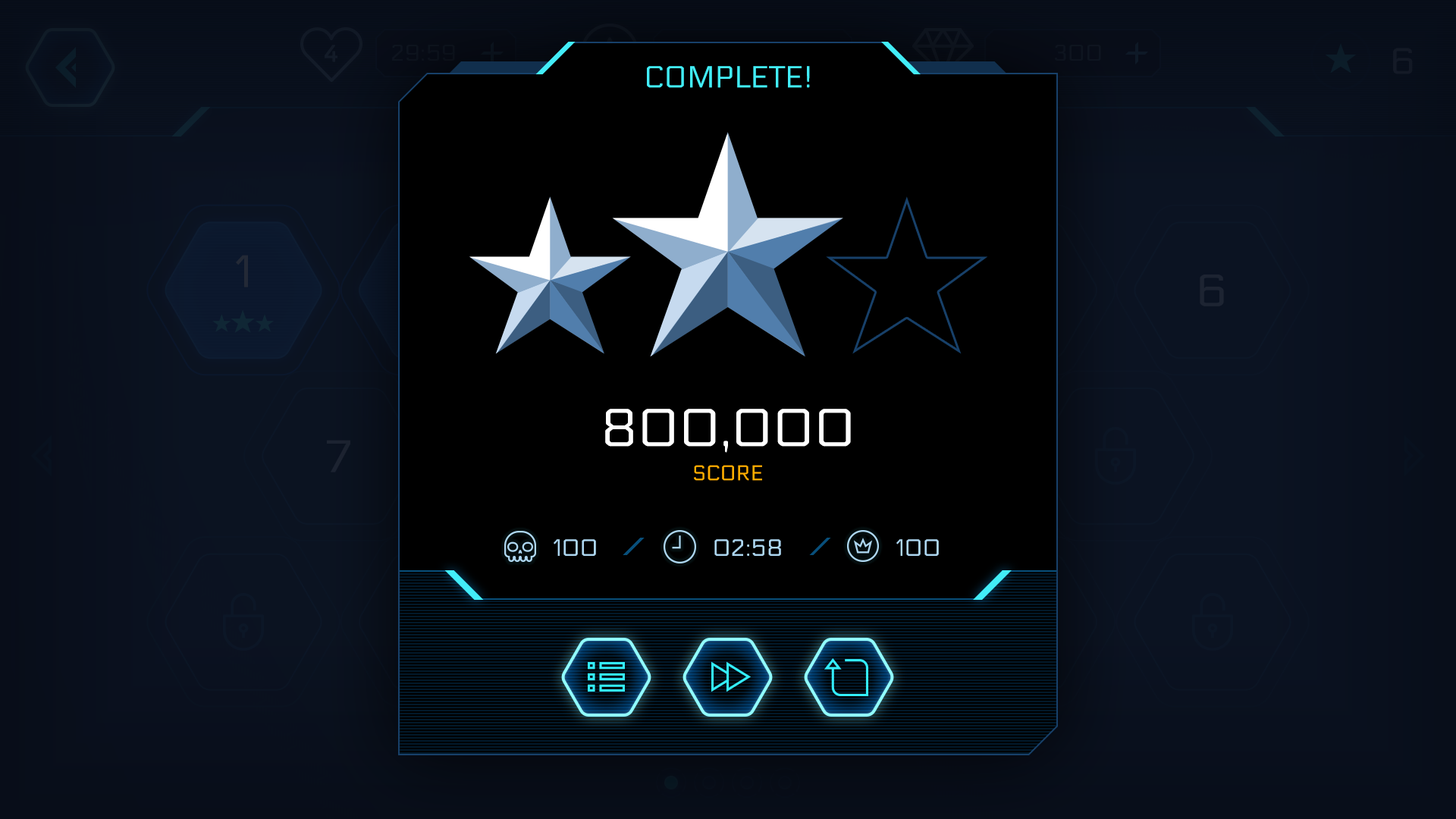
<style>
.page{position:relative;width:1456px;height:819px;background:#000000}
.page>*{position:absolute;margin:0}
.t1{font:30.3px "Electrolize-Regular";color:#42edf8;text-transform:uppercase}
.t2{font:53.1px "Electrolize-Regular";color:#ffffff}
.t3{font:21.2px "Electrolize-Regular";color:#ffae00;text-transform:uppercase}
.t4{font:23.5px "Electrolize-Regular";color:#aed7f1;text-transform:uppercase}
</style>
<div class="page">
<p class="t1" style="left:647px;top:66px;width:163px;height:22px">complete!</p>
<p class="t2" style="left:605px;top:409px;width:246px;height:44px">800,000</p>
<p class="t3" style="left:694px;top:465px;width:68px;height:16px">score</p>
<p class="t4" style="left:554px;top:539px;width:42px;height:17px">100</p>
<p class="t4" style="left:714px;top:539px;width:67px;height:17px">02:58</p>
<p class="t4" style="left:896px;top:539px;width:43px;height:17px">100</p>
</div>
